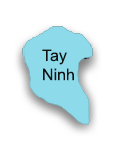
<style>
.page{position:relative;width:120px;height:150px;background:#ffffff}
.page>*{position:absolute;margin:0}
.t1{font:16px "ArialMT";color:#121212}
</style>
<div class="page">
<p class="t1" style="left:42px;top:49px;width:32px;height:32px">Tay <br>Ninh</p>
</div>
